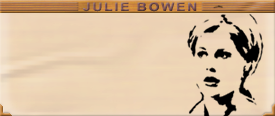
<style>
.page{position:relative;width:275px;height:116px}
.page>*{position:absolute;margin:0}
.t1{font:11.6px "Arial-BoldMT";letter-spacing:0.15em;scale:1.2 1}
</style>
<div class="page">
<p class="t1" style="left:83px;top:2px;width:114px;height:10px">JULIE BOWEN</p>
</div>
